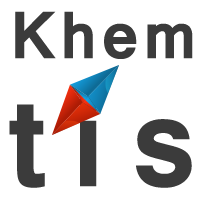
<style>
.page{position:relative;width:200px;height:200px;background:#ffffff}
.page>*{position:absolute;margin:0}
.t1{font:72px/72px "Vrinda-Bold";letter-spacing:0.055em;color:#3b3b3b}
.t2{font:140px/72px "Vrinda-Bold";letter-spacing:0.18em;color:#3b3b3b}
</style>
<div class="page">
<p class="t1" style="left:9px;top:11px;width:184px;height:177px;text-align:right">Khem<br><span class="t2">tis</span></p>
</div>
